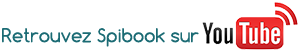
<style>
.page{position:relative;width:300px;height:52px;background:#ffffff}
.page>*{position:absolute;margin:0}
.t1{font:18px "Comfortaa";color:#1b6b74}
</style>
<div class="page">
<p class="t1" style="left:2px;top:28px;width:197px;height:19px">Retrouvez Spibook sur</p>
</div>
